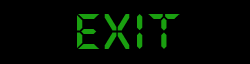
<style>
.page{position:relative;width:250px;height:64px;background:#000000}
.page>*{position:absolute;margin:0}
.t1{font:50px "QuartzMS";color:#1aa010}
</style>
<div class="page">
<p class="t1" style="left:77px;top:14px;width:103px;height:35px">Exit</p>
</div>
